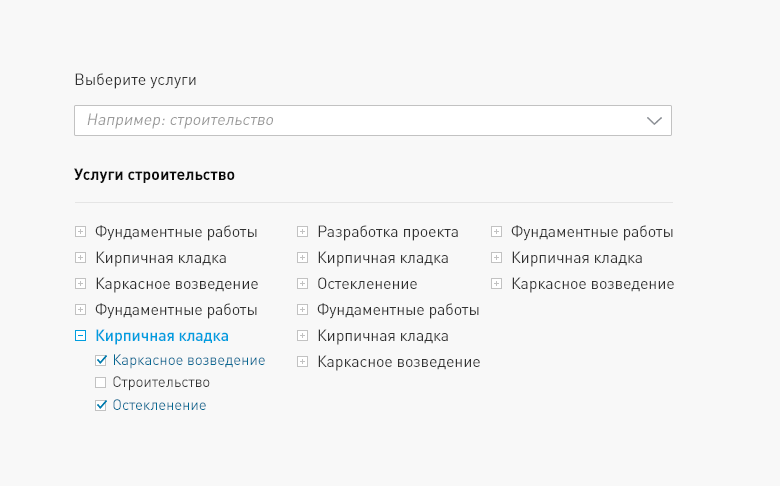
<style>
.page{position:relative;width:780px;height:486px;background:#f8f8f8}
.page>*{position:absolute;margin:0}
.t1{font:16px "DINPro-Regular";color:#313131}
.t2{font:16px "DINPro-Regular";color:#999999;font-style:italic}
.t3{font:16px "DINPro-Bold";color:#0b0b0b}
.t4{font:16px/26px "DINPro-Regular";letter-spacing:-0.01em;color:#313131}
.t5{font:16px/26px "DINPro-Regular";letter-spacing:-0.01em;color:#2d2d2d}
.t6{font:16px/26px "DINPro-Medium";letter-spacing:-0.01em;color:#019edf}
.t7{font:15px "DINPro-Regular";letter-spacing:-0.01em;color:#006792}
.t8{font:15px "DINPro-Regular";letter-spacing:-0.01em;color:#313131}
.t9{font:15px "DINPro-Regular";letter-spacing:-0.01em;color:#006791}
</style>
<div class="page">
<p class="t1" style="left:75px;top:73px;width:121px;height:16px">Выберите услуги</p>
<p class="t2" style="left:87px;top:113px;width:186px;height:16px">Например: строительство</p>
<p class="t3" style="left:74px;top:168px;width:161px;height:15px">Услуги строительство</p>
<p class="t4" style="left:95px;top:225px;width:163px;height:120px">Фундаментные работы<br>Кирпичная кладка<br><span class="t5">Каркасное возведение<br></span>Фундаментные работы<br><span class="t6">Кирпичная кладка</span></p>
<p class="t4" style="left:317px;top:225px;width:163px;height:146px">Разработка проекта<br>Кирпичная кладка<br>Остекленение<br>Фундаментные работы<br>Кирпичная кладка<br>Каркасное возведение</p>
<p class="t4" style="left:511px;top:225px;width:163px;height:68px">Фундаментные работы<br>Кирпичная кладка<br>Каркасное возведение</p>
<p class="t7" style="left:114px;top:354px;width:151px;height:15px">Каркасное возведение</p>
<p class="t8" style="left:113px;top:376px;width:97px;height:15px">Строительство</p>
<p class="t9" style="left:113px;top:399px;width:93px;height:11px">Остекленение</p>
</div>
